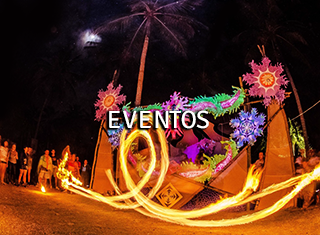
<style>
.page{position:relative;width:320px;height:235px}
.page>*{position:absolute;margin:0}
.t1{font:25px "Signika-Regular";color:#ffffff}
</style>
<div class="page">
<p class="t1" style="left:109px;top:110px;width:100px;height:19px">EVENTOS</p>
</div>
